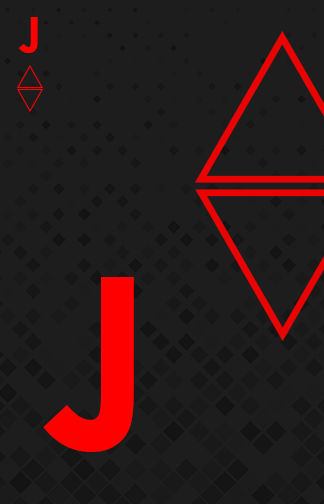
<style>
.page{position:relative;width:324px;height:504px;background:#1d1d1d}
.page>*{position:absolute;margin:0}
.t1{font:49px "CenturyGothic-Bold";color:#ff0000}
.t2{font:238.4px "CenturyGothic-Bold";color:#ff0000}
</style>
<div class="page">
<p class="t1" style="left:18px;top:17px;width:20px;height:36px">J</p>
<p class="t2" style="left:43px;top:277px;width:91px;height:175px">J</p>
</div>
